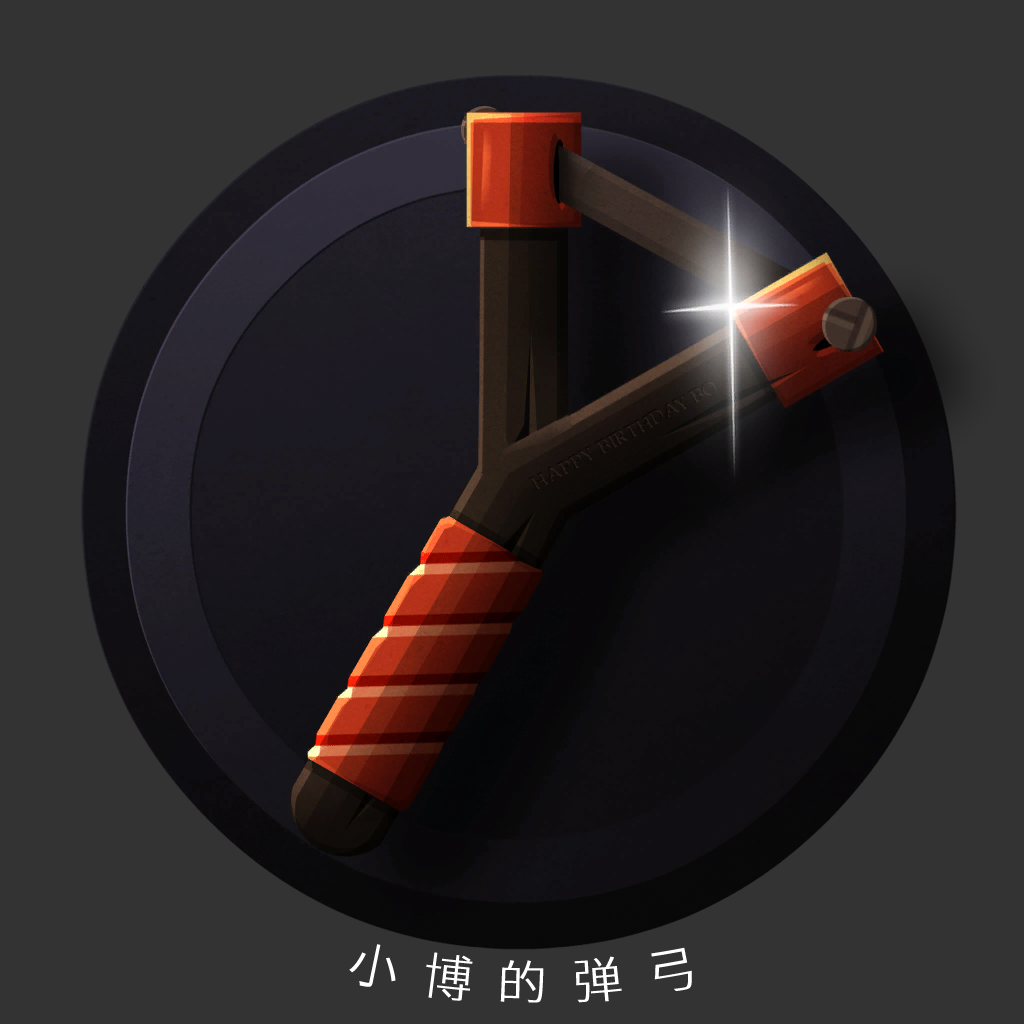
<style>
.page{position:relative;width:1024px;height:1024px;background:#333333}
.page>*{position:absolute;margin:0}
.t1{font:48px "SourceHanSansSC-Normal";letter-spacing:0.5em;color:#ffffff}
</style>
<div class="page">
<p class="t1" style="left:349px;top:944px;width:343px;height:59px">小博的弹弓</p>
</div>
